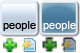
<style>
.page{position:relative;width:80px;height:53px}
.page>*{position:absolute;margin:0}
.t1{font:11px "ArialMT";color:#000000}
.t2{font:11px "ArialMT";color:#ffffff}
</style>
<div class="page">
<p class="t1" style="left:3px;top:21px;width:33px;height:10px">people</p>
<p class="t2" style="left:43px;top:21px;width:33px;height:10px">people</p>
</div>
